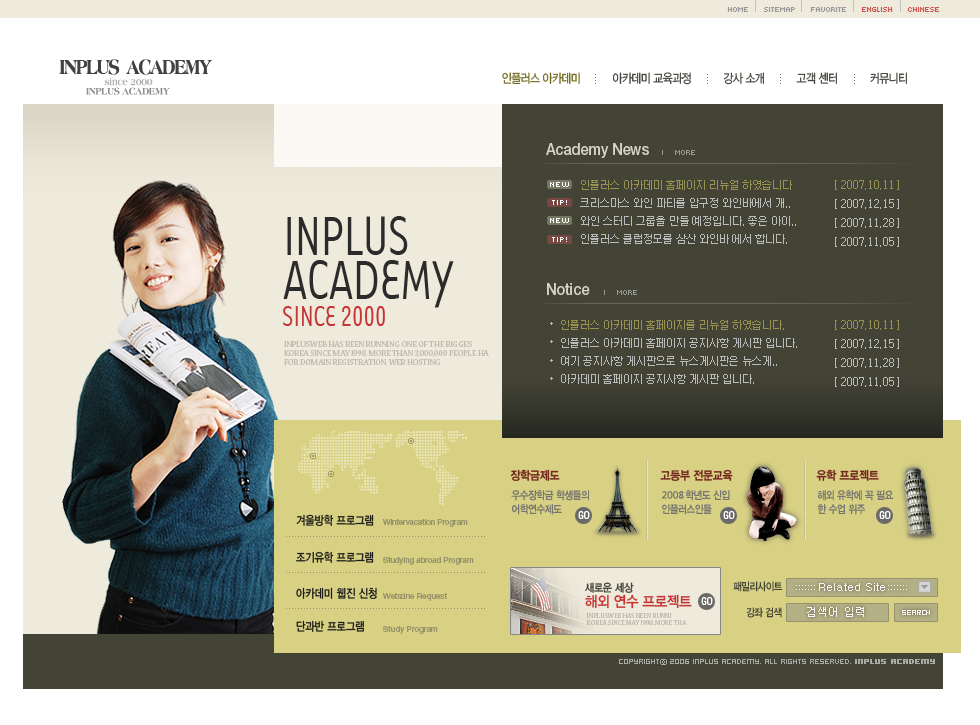
<style>
.page{position:relative;width:980px;height:725px;background:#434436}
.page>*{position:absolute;margin:0}
.t1{font:8px "Kroeger0555";color:#999999;text-transform:uppercase}
.t2{font:8px "Kroeger0555";color:#cd5855;text-transform:uppercase}
.t3{font:20.9px "Ameria-ExtraBold";letter-spacing:-0.1em;color:#414141;text-transform:uppercase;scale:0.82 1}
.t4{font:10.2px "Ameria-ExtraBold";letter-spacing:-0.04em;color:#afafaf;scale:0.86 1}
.t5{font:12.6px "YDIYGO320";letter-spacing:-0.05em;color:#46443e;scale:0.86 1}
.t6{font:12.6px "YDIYGO320";letter-spacing:-0.05em;color:#736b20;scale:0.86 1}
.t7{font:10.2px "Ameria-ExtraBold";letter-spacing:-0.04em;color:#8d8d8d;text-transform:uppercase;scale:0.86 1}
.t8{font:16px "HelveticaNeue-Medium";color:#d5d6c9;scale:0.9 1}
.t9{font:16px "HelveticaNeue-Medium";color:#d5d6c9;text-transform:uppercase;scale:0.9 1}
.t10{font:7px "Gulim";color:#999999;text-transform:uppercase}
.t11{font:8px "Kroeger0556";letter-spacing:-0.01em;color:#ffffff;text-transform:uppercase}
.t12{font:11px/18px "YDIWebDotum";color:#bbbbbb}
.t13{font:11px/18px "YDIWebDotum";color:#989252}
.t14{font:11px/19px "YDIWebDotum";color:#bbbbbb}
.t15{font:11px/19px "YDIWebDotum";color:#989252}
.t16{font:62.9px "Tarzana-Narrow";letter-spacing:-0.03em;color:#2b2b2b;text-transform:uppercase;scale:0.9 1}
.t17{font:33px "Tarzana-Narrow";letter-spacing:-0.03em;color:#c53333;text-transform:uppercase;scale:0.9 1}
.t18{font:9px/9px "NuevaStd-Regular";color:#bfbcb0;text-transform:uppercase}
.t19{font:12px "YDIYGO340";letter-spacing:-0.02em;color:#722620;scale:0.9 1}
.t20{font:11px/14px "YDIYGO330";letter-spacing:-0.04em;color:#777770;scale:0.86 1}
.t21{font:11px/14px "MyriadPro-Regular";color:#777770}
.t22{font:12px "YDIYGO330";letter-spacing:-0.01em;color:#1c1c1a;scale:0.85 1}
.t23{font:8px "HelveticaNeue-Roman";letter-spacing:-0.01em;color:#969269}
.t24{font:11px "Univers-Condensed";letter-spacing:-0.08em;color:#ffffff}
.t25{font:15px/15px "YDIYGO330";letter-spacing:-0.02em;color:#c53333;scale:0.9 1}
.t26{font:11px/15px "YDIYGO330";letter-spacing:-0.02em;color:#49483c;scale:0.9 1}
.t27{font:11px "YDIYGO340";letter-spacing:-0.05em;color:#434436;scale:0.85 1}
.t28{font:8px "HelveticaNeue-Roman";letter-spacing:0.01em;color:#969269}
.t29{font:11px "Dotum";letter-spacing:-0.005em;color:#f7f5f4}
.t30{font:7.2px/7px "NuevaStd-Regular";color:#bfbcb0;text-transform:uppercase}
.t31{font:11px "Dotum";letter-spacing:0.02em;color:#f7f5f4}
.t32{font:8px "04b03b";letter-spacing:-0.025em;color:#f7f5f4}
.t33{font:8px "Hooge0555";color:#aaaaa4}
.t34{font:8px "SandTg";color:#aaaaa4}
.t35{font:8px "Hooge0555";color:#aaaaa4;font-weight:bold}
</style>
<div class="page">
<p class="t1" style="left:727px;top:7px;width:213px;height:5px">Home     Sitemap     Favorite     <span class="t2">ENGLISH     CHINESE</span></p>
<p class="t3" style="left:59px;top:59px;width:154px;height:16px">INPLUS  academy</p>
<p class="t4" style="left:104px;top:77px;width:49px;height:9px">since 2000</p>
<p class="t5" style="left:502px;top:72px;width:405px;height:13px"><span class="t6">인플러스 아카데미</span>          아카데미 교육과정          강사 소개          고객 센터          커뮤니티</p>
<p class="t7" style="left:86px;top:87px;width:84px;height:8px">inplus academy</p>
<p class="t8" style="left:546px;top:143px;width:103px;height:15px"><span class="t9">a</span>cademy <span class="t9">n</span>ews</p>
<p class="t1" style="left:662px;top:150px;width:33px;height:5px"><span class="t10">Ι    </span>more</p>
<p class="t11" style="left:550px;top:182px;width:19px;height:5px">new</p>
<p class="t12" style="left:580px;top:180px;width:216px;height:64px"><span class="t13">인플러스 아카데미 홈페이지 리뉴얼 하였습니다 <br></span>크리스마스 와인 파티를 압구정 와인바에서 개..<br>와인 스터디 그룹을 만들 예정입니다. 좋은 아이..<br>인플러스 클럽정모를 삼산 와인바 에서 합니다.</p>
<p class="t14" style="left:835px;top:180px;width:64px;height:67px"><span class="t15">[ 2007.10.11 ]<br></span>[ 2007.12.15 ]<br>[ 2007.11.28 ]<br>[ 2007.11.05 ]</p>
<p class="t11" style="left:552px;top:200px;width:15px;height:5px">tip!</p>
<p class="t16" style="left:287px;top:216px;width:121px;height:39px">inplus</p>
<p class="t16" style="left:283px;top:260px;width:171px;height:48px">academy</p>
<p class="t8" style="left:547px;top:283px;width:43px;height:12px"><span class="t9">n</span>otice</p>
<p class="t1" style="left:604px;top:290px;width:33px;height:5px"><span class="t10">Ι    </span>more</p>
<p class="t17" style="left:283px;top:306px;width:102px;height:20px">since 2000</p>
<p class="t12" style="left:561px;top:320px;width:236px;height:64px"><span class="t13">인플러스 아카데미 홈페이지를 리뉴얼 하였습니다.<br></span>인플러스 아카데미 홈페이지 공지사항 게시판 입니다.<br>여기 공지사항 게시판으로 뉴스게시판은 뉴스게..<br>아카데미 홈페이지 공지사항 게시판 입니다.</p>
<p class="t14" style="left:835px;top:320px;width:64px;height:67px"><span class="t15">[ 2007.10.11 ]<br></span>[ 2007.12.15 ]<br>[ 2007.11.28 ]<br>[ 2007.11.05 ]</p>
<p class="t18" style="left:284px;top:341px;width:205px;height:25px">INPLUSWEB has been running one of the bigges<br>Korea since May 1998. More than 3,000,000 people ha<br>for domain registration, web hosting</p>
<p class="t19" style="left:510px;top:469px;width:50px;height:12px">장학금제도</p>
<p class="t19" style="left:660px;top:469px;width:73px;height:12px">고등부 전문교육</p>
<p class="t19" style="left:816px;top:469px;width:63px;height:12px">유학 프로젝트</p>
<p class="t20" style="left:511px;top:490px;width:78px;height:25px">우수장학금 학생들의<br>어학연수제도</p>
<p class="t20" style="left:661px;top:490px;width:69px;height:25px"><span class="t21">2008 </span>학년도 신입 <br>인플러스인들</p>
<p class="t20" style="left:817px;top:490px;width:77px;height:25px">해외 유학에 꼭 필요<br>한 수업 위주</p>
<p class="t22" style="left:296px;top:514px;width:78px;height:12px">겨울방학 프로그램</p>
<p class="t23" style="left:382px;top:519px;width:86px;height:8px">Wintervacation Program</p>
<p class="t24" style="left:578px;top:511px;width:12px;height:8px">GO</p>
<p class="t24" style="left:723px;top:511px;width:12px;height:8px">GO</p>
<p class="t24" style="left:879px;top:511px;width:12px;height:8px">GO</p>
<p class="t22" style="left:296px;top:551px;width:78px;height:12px">조기유학 프로그램</p>
<p class="t23" style="left:383px;top:557px;width:91px;height:8px">Studying abroad Program</p>
<p class="t25" style="left:585px;top:582px;width:107px;height:27px"><span class="t26">새로운 세상<br></span>해외 연수 프로젝트</p>
<p class="t27" style="left:733px;top:581px;width:50px;height:11px">패밀리사이트</p>
<p class="t22" style="left:296px;top:587px;width:81px;height:12px">아카데미 웹진 신청</p>
<p class="t28" style="left:382px;top:593px;width:65px;height:8px">Webzine Request</p>
<p class="t29" style="left:819px;top:583px;width:66px;height:8px">Related Site</p>
<p class="t24" style="left:701px;top:597px;width:12px;height:8px">GO</p>
<p class="t30" style="left:586px;top:613px;width:101px;height:12px">INPLUSWEB has been runni<br>Korea since May 1998. More tha</p>
<p class="t27" style="left:746px;top:607px;width:36px;height:11px">강좌 검색</p>
<p class="t31" style="left:807px;top:607px;width:57px;height:10px">검색어 입력</p>
<p class="t32" style="left:902px;top:610px;width:28px;height:5px">SEARCH</p>
<p class="t22" style="left:296px;top:620px;width:68px;height:12px">단과반 프로그램</p>
<p class="t28" style="left:383px;top:626px;width:55px;height:8px">Study Program</p>
<p class="t33" style="left:619px;top:659px;width:316px;height:6px">copyright<span class="t34">ⓒ </span>2006 INPLUS academy. all rights reserved. <span class="t35">INPLUS academy</span></p>
</div>
